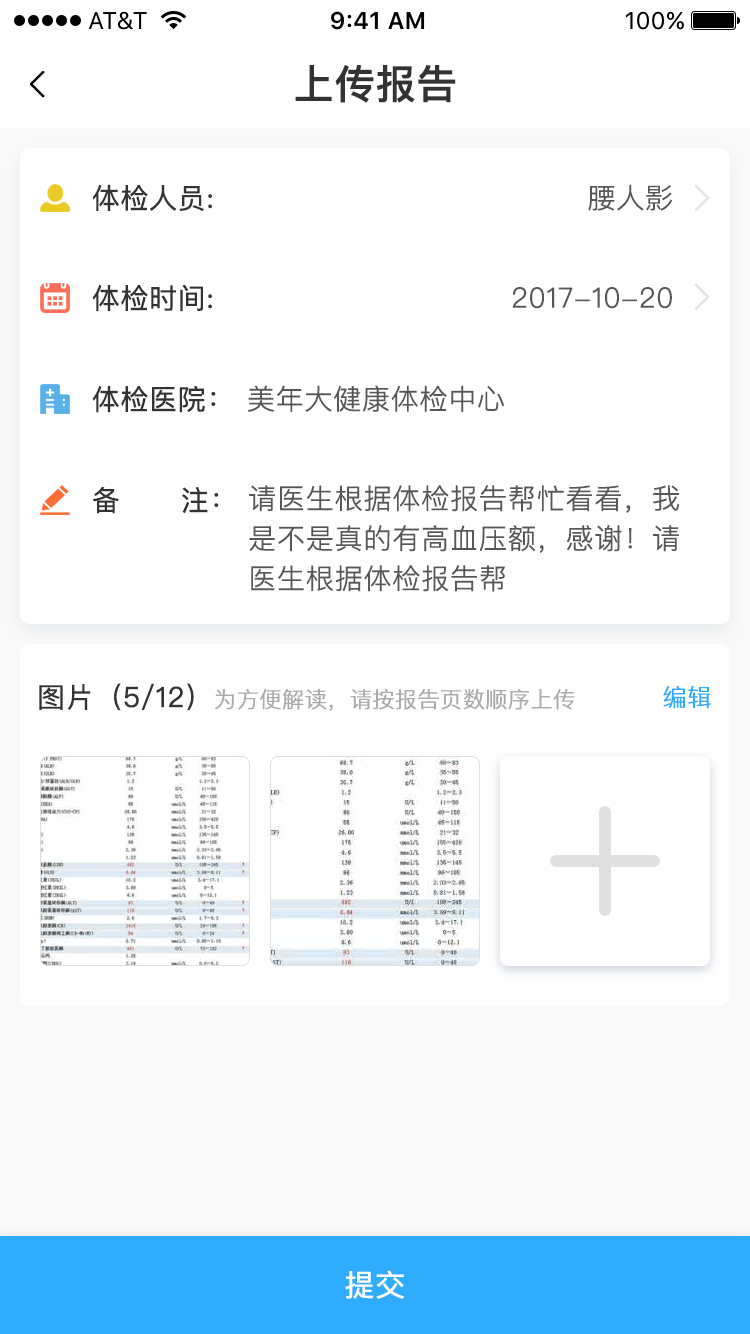
<style>
.page{position:relative;width:750px;height:1334px;background:#ffffff}
.page>*{position:absolute;margin:0}
.t1{font:40px "PingFangSC-Medium";color:#333333;font-weight:bold}
.t2{font:28px "PingFangSC-Regular";color:#333333;font-weight:bold}
.t3{font:28px "PingFangSC-Light";color:#575757;font-weight:bold}
.t4{font:28px/40px "PingFangSC-Light";color:#575757;font-weight:bold}
.t5{font:22px "PingFangSC-Light";color:#ababab;font-weight:bold}
.t6{font:24px "PingFangSC-Light";color:#30acff;font-weight:bold}
.t7{font:30px "PingFangSC-Regular";color:#ffffff;font-weight:bold}
</style>
<div class="page">
<p class="t1" style="left:295px;top:64px;width:161px;height:39px">上传报告</p>
<p class="t2" style="left:92px;top:184px;width:120px;height:27px">体检人员:</p>
<p class="t3" style="left:588px;top:184px;width:85px;height:27px">腰人影</p>
<p class="t2" style="left:92px;top:284px;width:120px;height:28px">体检时间:</p>
<p class="t3" style="left:512px;top:287px;width:160px;height:22px">2017-10-20</p>
<p class="t2" style="left:92px;top:386px;width:124px;height:27px">体检医院：</p>
<p class="t3" style="left:248px;top:385px;width:257px;height:27px">美年大健康体检中心</p>
<p class="t2" style="left:93px;top:486px;width:126px;height:28px">备      注：</p>
<p class="t4" style="left:249px;top:485px;width:431px;height:107px">请医生根据体检报告帮忙看看，我是不是真的有高血压额，感谢！请医生根据体检报告帮</p>
<p class="t5" style="left:39px;top:683px;width:536px;height:28px"><span class="t2">图片（5/12）</span>为方便解读，请按报告页数顺序上传</p>
<p class="t6" style="left:663px;top:685px;width:48px;height:24px">编辑</p>
<p class="t7" style="left:345px;top:1270px;width:59px;height:29px">提交</p>
</div>
